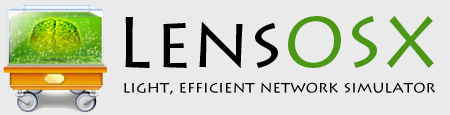
<style>
.page{position:relative;width:450px;height:115px;background:#eaeaea}
.page>*{position:absolute;margin:0}
.t1{font:71.9px "LithosPro-Regular";color:#000000}
.t2{font:71.9px "LithosPro-Regular";color:#4c9717}
.t3{font:16.2px "LithosPro-Regular";color:#000000}
</style>
<div class="page">
<p class="t1" style="left:125px;top:16px;width:309px;height:52px">Lens<span class="t2">OSX</span></p>
<p class="t3" style="left:124px;top:82px;width:311px;height:13px">light, efficient network simulator</p>
</div>
